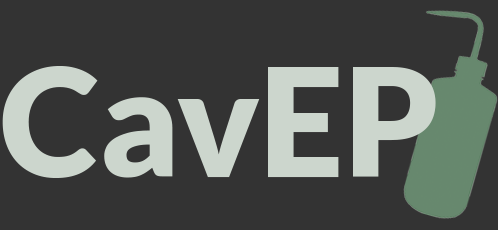
<style>
.page{position:relative;width:498px;height:230px;background:#333333}
.page>*{position:absolute;margin:0}
.t1{font:150px "Lato-Black";color:#ccd6cd}
</style>
<div class="page">
<p class="t1" style="left:2px;top:66px;width:434px;height:112px">CavEP</p>
</div>
